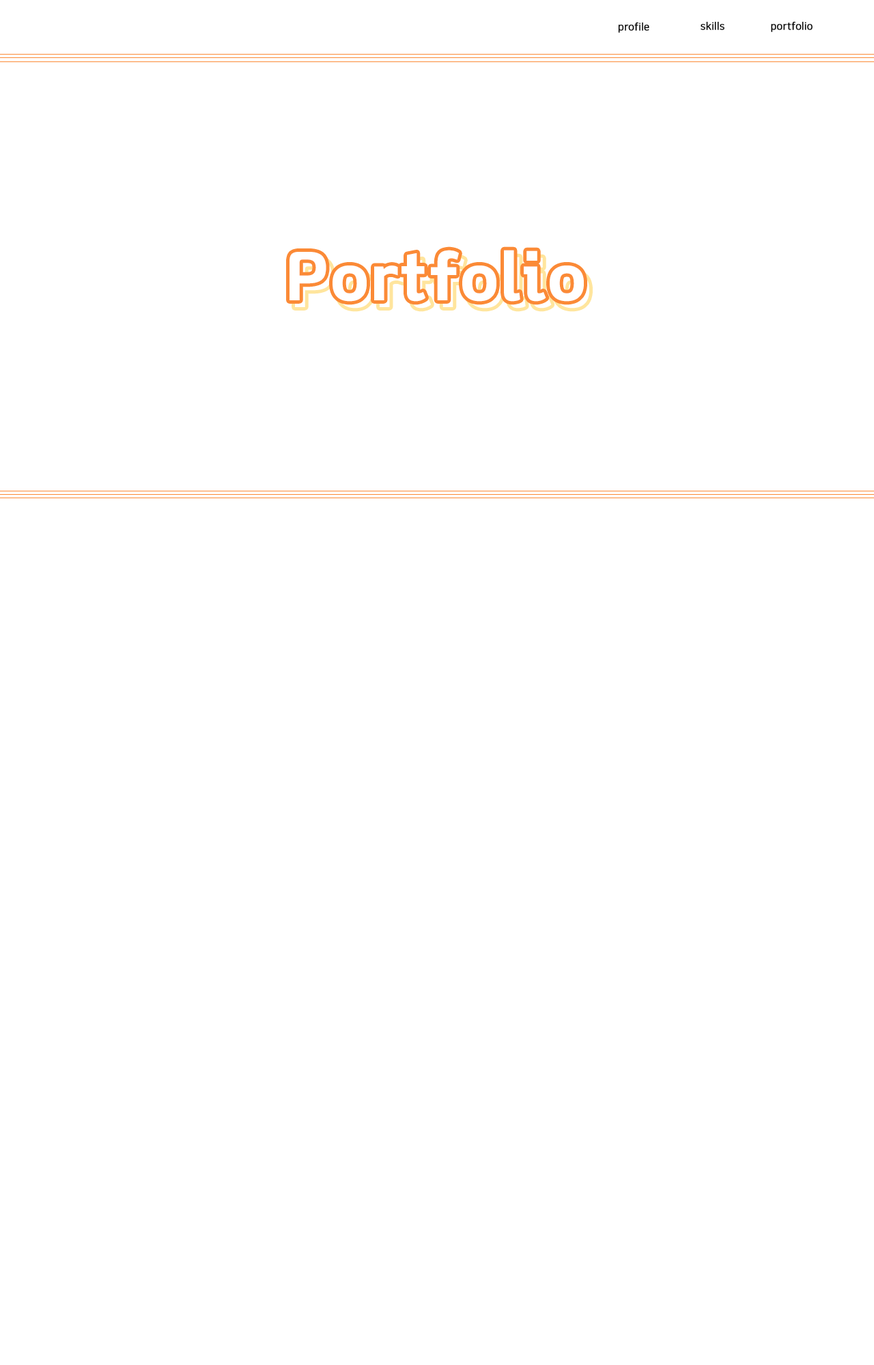
<style>
.page{position:relative;width:874px;height:1365px;background:#ffffff}
.page>*{position:absolute;margin:0}
.t1{font:10.2px "NanumSquare_acR";color:#000000;font-weight:bold}
.t2{font:68.2px "GyeonggiTitleV";color:#ffffff}
</style>
<div class="page">
<p class="t1" style="left:618px;top:22px;width:31px;height:11px">profile</p>
<p class="t1" style="left:700px;top:21px;width:24px;height:9px">skills</p>
<p class="t1" style="left:771px;top:21px;width:41px;height:11px">portfolio</p>
<p class="t2" style="left:289px;top:250px;width:295px;height:52px">Portfolio</p>
</div>
